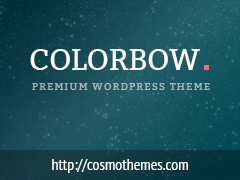
<style>
.page{position:relative;width:240px;height:180px}
.page>*{position:absolute;margin:0}
.t1{font:30px "Bitter-Regular";letter-spacing:-0.01em;color:#ffffff;text-transform:uppercase}
.t2{font:10px "Bitter-Regular";letter-spacing:0.13em;color:#a8b7bb;text-transform:uppercase}
.t3{font:16px "PTSans-Narrow";color:#ffffff}
</style>
<div class="page">
<p class="t1" style="left:30px;top:49px;width:170px;height:21px">colorbow</p>
<p class="t2" style="left:32px;top:83px;width:178px;height:7px">Premium WordPress Theme</p>
<p class="t3" style="left:52px;top:159px;width:136px;height:14px">http://cosmothemes.com</p>
</div>
